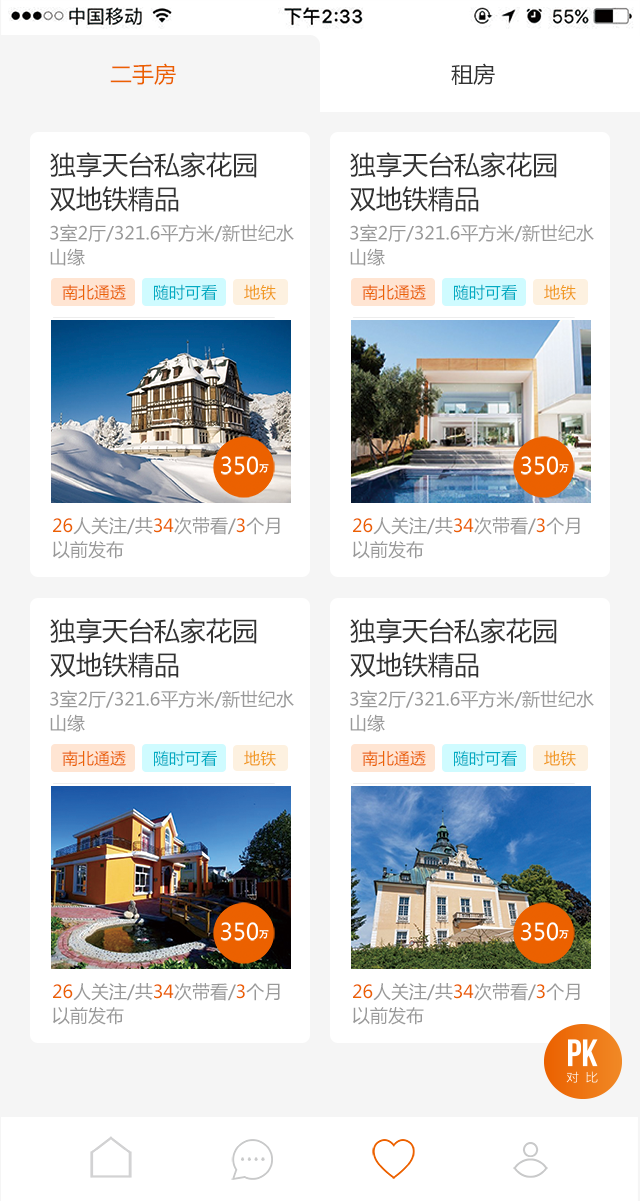
<style>
.page{position:relative;width:640px;height:1201px;background:#ffffff}
.page>*{position:absolute;margin:0}
.t1{font:22px "MicrosoftYaHei";color:#eb6100}
.t2{font:22px "MicrosoftYaHei";color:#333333}
.t3{font:26px/34px "MicrosoftYaHei";color:#333333}
.t4{font:18px/24px "MicrosoftYaHei";color:#999999}
.t5{font:16px "MicrosoftYaHei";color:#eb6100}
.t6{font:16px "MicrosoftYaHei";color:#00acc3}
.t7{font:16px "MicrosoftYaHei";color:#f19a21}
.t8{font:18px/24px "MicrosoftYaHei";color:#eb6100}
.t9{font:18px/24px "MicrosoftYaHei";color:#eb6000}
.t10{font:18px/24px "MicrosoftYaHei";color:#ec6100}
</style>
<div class="page">
<p class="t1" style="left:110px;top:63px;width:66px;height:22px">二手房</p>
<p class="t2" style="left:451px;top:63px;width:44px;height:22px">租房</p>
<p class="t3" style="left:50px;top:152px;width:207px;height:60px">独享天台私家花园<br>双地铁精品</p>
<p class="t3" style="left:350px;top:152px;width:207px;height:60px">独享天台私家花园<br>双地铁精品</p>
<p class="t4" style="left:50px;top:224px;width:244px;height:42px">3室2厅/321.6平方米/新世纪水<br>山缘</p>
<p class="t4" style="left:350px;top:224px;width:244px;height:42px">3室2厅/321.6平方米/新世纪水<br>山缘</p>
<p class="t5" style="left:62px;top:284px;width:64px;height:16px">南北通透</p>
<p class="t6" style="left:154px;top:284px;width:63px;height:17px">随时可看</p>
<p class="t7" style="left:244px;top:284px;width:32px;height:17px">地铁</p>
<p class="t5" style="left:362px;top:284px;width:64px;height:16px">南北通透</p>
<p class="t6" style="left:454px;top:284px;width:63px;height:17px">随时可看</p>
<p class="t7" style="left:544px;top:284px;width:32px;height:17px">地铁</p>
<p class="t4" style="left:53px;top:517px;width:227px;height:42px"><span class="t8">26</span>人关注/共<span class="t9">34</span>次带看/<span class="t10">3</span>个月<br>以前发布</p>
<p class="t4" style="left:353px;top:517px;width:227px;height:42px"><span class="t8">26</span>人关注/共<span class="t9">34</span>次带看/<span class="t10">3</span>个月<br>以前发布</p>
<p class="t3" style="left:50px;top:618px;width:207px;height:60px">独享天台私家花园<br>双地铁精品</p>
<p class="t3" style="left:350px;top:618px;width:207px;height:60px">独享天台私家花园<br>双地铁精品</p>
<p class="t4" style="left:50px;top:690px;width:244px;height:42px">3室2厅/321.6平方米/新世纪水<br>山缘</p>
<p class="t4" style="left:350px;top:690px;width:244px;height:42px">3室2厅/321.6平方米/新世纪水<br>山缘</p>
<p class="t5" style="left:62px;top:750px;width:64px;height:16px">南北通透</p>
<p class="t6" style="left:154px;top:750px;width:63px;height:17px">随时可看</p>
<p class="t7" style="left:244px;top:750px;width:32px;height:17px">地铁</p>
<p class="t5" style="left:362px;top:750px;width:64px;height:16px">南北通透</p>
<p class="t6" style="left:454px;top:750px;width:63px;height:17px">随时可看</p>
<p class="t7" style="left:544px;top:750px;width:32px;height:17px">地铁</p>
<p class="t4" style="left:53px;top:983px;width:227px;height:42px"><span class="t8">26</span>人关注/共<span class="t9">34</span>次带看/<span class="t10">3</span>个月<br>以前发布</p>
<p class="t4" style="left:353px;top:983px;width:227px;height:42px"><span class="t8">26</span>人关注/共<span class="t9">34</span>次带看/<span class="t10">3</span>个月<br>以前发布</p>
</div>
